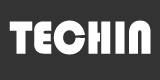
<style>
.page{position:relative;width:160px;height:80px;background:#333333}
.page>*{position:absolute;margin:0}
.t1{font:48px "Bauhaus93";letter-spacing:-0.01em;color:#ffffff;text-transform:uppercase;scale:0.92 1}
</style>
<div class="page">
<p class="t1" style="left:9px;top:20px;width:142px;height:35px">TechIN</p>
</div>
